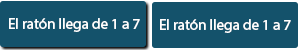
<style>
.page{position:relative;width:300px;height:50px;background:#14526b}
.page>*{position:absolute;margin:0}
.t1{font:15px "MyriadHebrew-Regular";color:#ffffff}
</style>
<div class="page">
<p class="t1" style="left:9px;top:18px;width:131px;height:14px">El ratón llega de 1 a 7</p>
<p class="t1" style="left:160px;top:19px;width:131px;height:14px">El ratón llega de 1 a 7</p>
</div>
